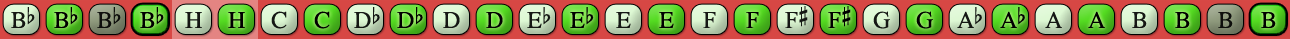
<style>
.page{position:relative;width:1290px;height:39px}
.page>*{position:absolute;margin:0}
.t1{font:24px "OpusChords";color:#000000}
.t2{font:24px "OpusChords";letter-spacing:-0.05em;color:#000000}
</style>
<div class="page">
<p class="t1" style="left:785px;top:6px;width:23px;height:22px;opacity:0.9">F#</p>
<p class="t1" style="left:828px;top:6px;width:23px;height:22px">F#</p>
<p class="t1" style="left:11px;top:7px;width:24px;height:21px;opacity:0.9">Bb</p>
<p class="t1" style="left:54px;top:7px;width:24px;height:21px">Bb</p>
<p class="t1" style="left:97px;top:7px;width:24px;height:21px;opacity:0.9">Bb</p>
<p class="t1" style="left:140px;top:7px;width:24px;height:21px">Bb</p>
<p class="t1" style="left:185px;top:12px;width:17px;height:16px;opacity:0.9">H</p>
<p class="t1" style="left:228px;top:12px;width:17px;height:16px">H</p>
<p class="t1" style="left:271px;top:11px;width:16px;height:18px;opacity:0.9">C</p>
<p class="t1" style="left:314px;top:11px;width:16px;height:18px">C</p>
<p class="t1" style="left:354px;top:7px;width:26px;height:21px;opacity:0.9">Db</p>
<p class="t1" style="left:397px;top:7px;width:26px;height:21px">Db</p>
<p class="t1" style="left:443px;top:12px;width:17px;height:16px;opacity:0.9">D</p>
<p class="t1" style="left:486px;top:12px;width:17px;height:16px">D</p>
<p class="t1" style="left:527px;top:7px;width:24px;height:21px;opacity:0.9">Eb</p>
<p class="t1" style="left:570px;top:7px;width:24px;height:21px">Eb</p>
<p class="t1" style="left:616px;top:12px;width:15px;height:16px;opacity:0.9">E</p>
<p class="t1" style="left:659px;top:12px;width:15px;height:16px">E</p>
<p class="t1" style="left:703px;top:12px;width:13px;height:16px;opacity:0.9">F</p>
<p class="t1" style="left:746px;top:12px;width:13px;height:16px">F</p>
<p class="t1" style="left:873px;top:11px;width:17px;height:18px;opacity:0.9">G</p>
<p class="t1" style="left:916px;top:11px;width:17px;height:18px">G</p>
<p class="t2" style="left:957px;top:7px;width:25px;height:21px;opacity:0.9">Ab</p>
<p class="t2" style="left:1000px;top:7px;width:25px;height:21px">Ab</p>
<p class="t1" style="left:1045px;top:11px;width:17px;height:17px;opacity:0.9">A</p>
<p class="t1" style="left:1088px;top:11px;width:17px;height:17px">A</p>
<p class="t1" style="left:1132px;top:12px;width:15px;height:16px;opacity:0.9">B</p>
<p class="t1" style="left:1175px;top:12px;width:15px;height:16px">B</p>
<p class="t1" style="left:1218px;top:12px;width:15px;height:16px;opacity:0.9">B</p>
<p class="t1" style="left:1261px;top:12px;width:15px;height:16px">B</p>
</div>
